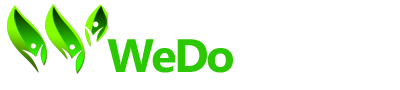
<style>
.page{position:relative;width:400px;height:90px;background:#ffffff}
.page>*{position:absolute;margin:0}
.t1{font:46.7px "LeelawadeeUI-Bold";letter-spacing:-0.05em;color:#2dc804}
</style>
<div class="page">
<p class="t1" style="left:107px;top:39px;width:126px;height:34px">WeDo</p>
</div>
